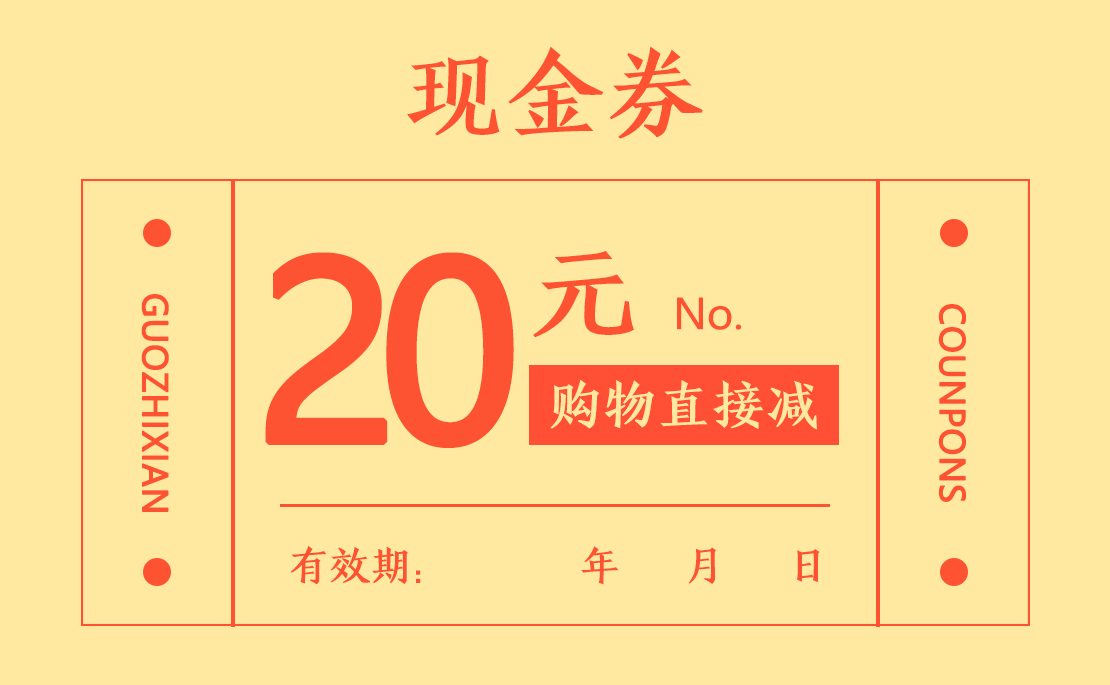
<style>
.page{position:relative;width:1110px;height:685px;background:#ffe9a0}
.page>*{position:absolute;margin:0}
.t1{font:100px "HYJinKaiJ";color:#fd5332}
.t2{font:241.7px "MicrosoftYaHei";letter-spacing:-0.1em;color:#fd5332;font-weight:bold}
.t3{font:241.7px "MicrosoftYaHei";color:#fd5332;font-weight:bold}
.t4{font:108.3px "HYJinKaiJ";color:#fd5332}
.t5{font:33.3px "MicrosoftYaHei";color:#fd5332;font-weight:bold}
.t6{font:41.7px "MicrosoftYaHei";color:#fd5332}
.t7{font:54.2px "HYJinKaiJ";color:#ffe9a0}
.t8{font:41.7px "HYJinKaiJ";color:#fd5332}
</style>
<div class="page">
<p class="t1" style="left:407px;top:46px;width:296px;height:93px">现金券</p>
<p class="t2" style="left:265px;top:252px;width:249px;height:196px">2<span class="t3">0</span></p>
<p class="t4" style="left:533px;top:251px;width:101px;height:87px">元</p>
<p class="t5" style="left:141px;top:294px;width:28px;height:218px;rotate:90deg">GUOZHIXIAN</p>
<p class="t6" style="left:677px;top:297px;width:65px;height:33px">No.</p>
<p class="t5" style="left:938px;top:304px;width:28px;height:198px;rotate:90deg">COUNPONS</p>
<p class="t7" style="left:550px;top:379px;width:267px;height:51px">购物直接减</p>
<p class="t8" style="left:290px;top:546px;width:530px;height:39px">有效期：      年   月   日</p>
</div>
